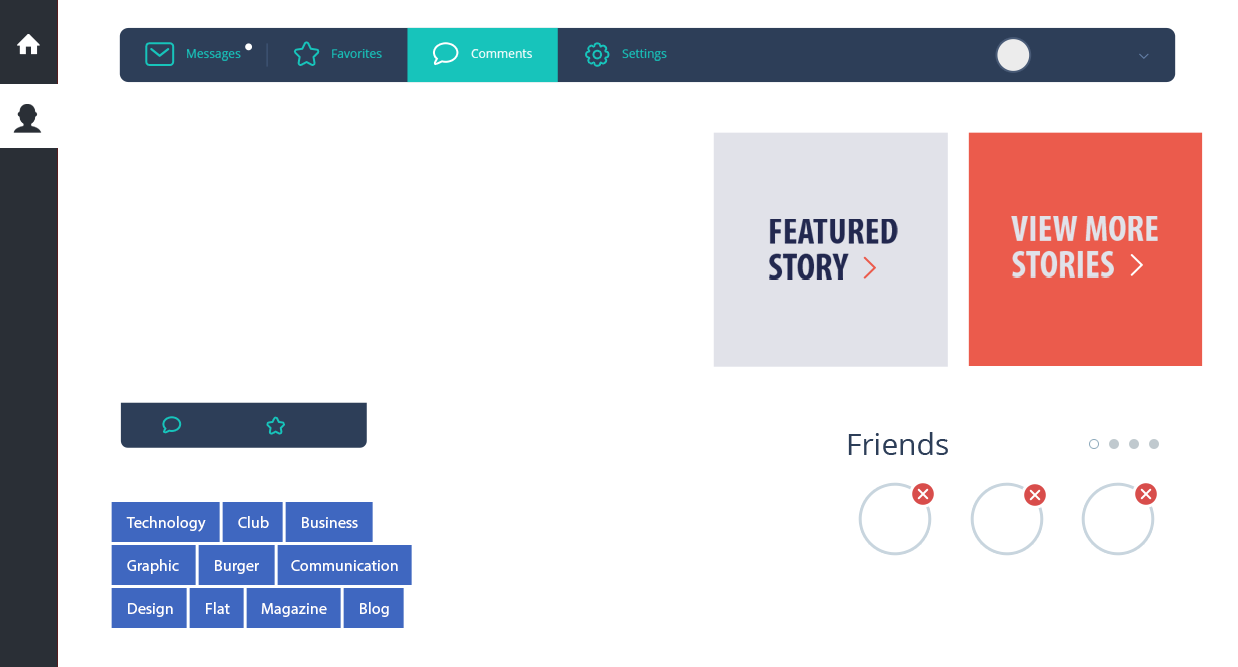
<style>
.page{position:relative;width:1238px;height:667px;background:#ffffff}
.page>*{position:absolute;margin:0}
.t1{font:12px "OpenSans";color:#17c4bb}
.t2{font:12px "OpenSans";color:#ffffff}
.t3{font:37.4px/35.9px "MyriadPro-BoldCond";color:#22284f}
.t4{font:37.3px/35.8px "MyriadPro-BoldCond";color:#e1e2e9}
.t5{font:30px "OpenSans";color:#2d3e58}
.t6{font:16px "MyriadPro-Regular";color:#ffffff}
</style>
<div class="page">
<p class="t1" style="left:187px;top:49px;width:54px;height:12px">Messages</p>
<p class="t1" style="left:332px;top:49px;width:50px;height:9px">Favorites</p>
<p class="t2" style="left:471px;top:49px;width:61px;height:9px">Comments</p>
<p class="t1" style="left:622px;top:49px;width:45px;height:12px">Settings</p>
<p class="t3" style="left:769px;top:219px;width:129px;height:61px">FEATURED<br>STORY</p>
<p class="t4" style="left:1011px;top:216px;width:147px;height:62px">VIEW MORE<br>STORIES</p>
<p class="t5" style="left:848px;top:432px;width:100px;height:23px">Friends</p>
<p class="t6" style="left:126px;top:516px;width:80px;height:16px">Technology</p>
<p class="t6" style="left:238px;top:516px;width:31px;height:12px">Club</p>
<p class="t6" style="left:302px;top:517px;width:56px;height:11px">Business</p>
<p class="t6" style="left:127px;top:559px;width:52px;height:15px">Graphic</p>
<p class="t6" style="left:215px;top:560px;width:44px;height:14px">Burger</p>
<p class="t6" style="left:291px;top:560px;width:107px;height:11px">Communication</p>
<p class="t6" style="left:128px;top:603px;width:45px;height:14px">Design</p>
<p class="t6" style="left:206px;top:602px;width:24px;height:12px">Flat</p>
<p class="t6" style="left:261px;top:603px;width:66px;height:14px">Magazine</p>
<p class="t6" style="left:360px;top:602px;width:29px;height:15px">Blog</p>
</div>
